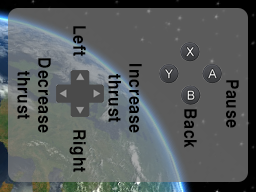
<style>
.page{position:relative;width:256px;height:192px;background:#5b5b5b}
.page>*{position:absolute;margin:0}
.t1{font:17.2px "Helvetica-Bold";letter-spacing:0.05em;color:#000000;scale:0.92 1}
</style>
<div class="page">
<p class="t1" style="left:73px;top:26px;width:13px;height:30px;rotate:90deg">Left</p>
<p class="t1" style="left:17px;top:58px;width:34px;height:75px;text-align:center;rotate:90deg">Decrease<br>thrust</p>
<p class="t1" style="left:108px;top:64px;width:34px;height:69px;text-align:center;rotate:90deg">Increase<br>thrust</p>
<p class="t1" style="left:226px;top:80px;width:13px;height:48px;rotate:90deg">Pause</p>
<p class="t1" style="left:184px;top:109px;width:13px;height:39px;rotate:90deg">Back</p>
<p class="t1" style="left:69px;top:130px;width:17px;height:42px;rotate:90deg">Right</p>
</div>
